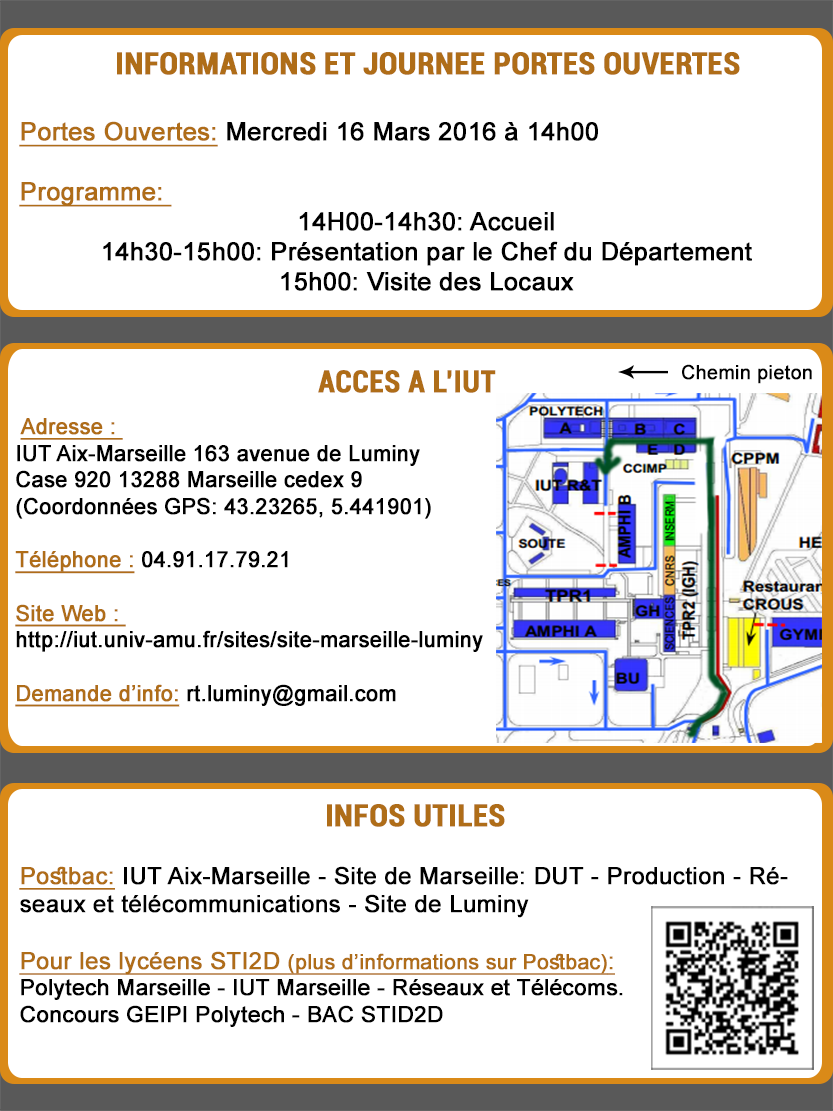
<style>
.page{position:relative;width:833px;height:1111px;background:#ffffff}
.page>*{position:absolute;margin:0}
.t1{font:30.6px "Roboto-BoldCondensed";color:#af6d18;font-weight:bold}
.t2{font:25px "ArialMT";color:#000000;font-weight:bold}
.t3{font:25px "ArialMT";color:#af6d18;font-weight:bold;text-decoration:underline}
.t4{font:19.4px "ArialMT";color:#000000;font-weight:bold}
.t5{font:30.6px "Roboto-BoldCondensed";color:#af6d18;font-weight:bold;scale:0.96 1}
.t6{font:22.2px "ArialMT";color:#000000;font-weight:bold;scale:0.96 1}
.t7{font:22.2px "ArialMT";color:#af6d18;font-weight:bold;text-decoration:underline;scale:0.96 1}
.t8{font:23.6px "ArialMT";color:#000000;font-weight:bold}
.t9{font:23.6px "ArialMT";color:#af6d18;font-weight:bold;text-decoration:underline}
.t10{font:20.8px "ArialMT";color:#af6d18;font-weight:bold;text-decoration:underline}
.t11{font:22.2px "ArialMT";color:#000000;font-weight:bold}
</style>
<div class="page">
<p class="t1" style="left:117px;top:52px;width:623px;height:23px">INFORMATIONS ET JOURNEE PORTES OUVERTES</p>
<p class="t2" style="left:19px;top:121px;width:733px;height:170px"><span class="t3">Portes Ouvertes:</span> Mercredi 16 Mars 2016 à 14h00<br><br><span class="t3">Programme: <br></span>14H00-14h30: Accueil<br>14h30-15h00: Présentation par le Chef du Département<br>15h00: Visite des Locaux</p>
<p class="t4" style="left:682px;top:364px;width:130px;height:20px">Chemin pieton</p>
<p class="t5" style="left:318px;top:370px;width:178px;height:23px">ACCES A L’IUT</p>
<p class="t6" style="left:15px;top:418px;width:468px;height:289px"><span class="t7">Adresse : <br></span>IUT Aix-Marseille 163 avenue de Luminy <br>Case 920 13288 Marseille cedex 9<br>(Coordonnées GPS: 43.23265, 5.441901)<br><br><span class="t7">Téléphone :</span> 04.91.17.79.21<br> <br><span class="t7">Site Web : <br></span>http://iut.univ-amu.fr/sites/site-marseille-luminy<br><br><span class="t7">Demande d’info: </span>rt.luminy@gmail.com</p>
<p class="t1" style="left:327px;top:804px;width:178px;height:23px">INFOS UTILES</p>
<p class="t8" style="left:19px;top:866px;width:769px;height:161px"><span class="t9">Postbac:</span> IUT Aix-Marseille - Site de Marseille: DUT - Production - Réseaux et télécommunications - Site de Luminy<br><br><span class="t9">Pour les lycéens STI2D </span><span class="t10">(plus d’informations sur Postbac)</span><span class="t9">:<br></span><span class="t11">Polytech Marseille - IUT Marseille - Réseaux et Télécoms.<br>Concours GEIPI Polytech - BAC STID2D</span></p>
</div>
